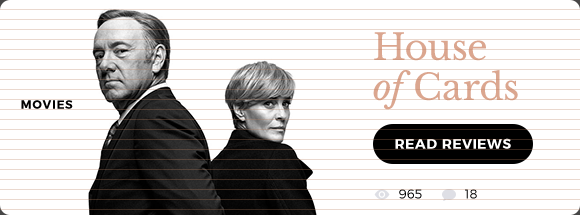
<style>
.page{position:relative;width:580px;height:215px;background:#ffffff}
.page>*{position:absolute;margin:0}
.t1{font:36px/40px "LibreBaskerville-Regular";color:#dba68f}
.t2{font:36px/40px "LibreBaskerville-Italic";color:#dba68f}
.t3{font:12px "Montserrat-Bold";letter-spacing:0.05em;color:#000000;text-transform:uppercase}
.t4{font:14px "Montserrat-Bold";letter-spacing:0.05em;color:#ffffff;text-transform:uppercase}
.t5{font:13px "Montserrat-Light";color:#000000}
.t6{font:13px "Montserrat-Light"}
</style>
<div class="page">
<p class="t1" style="left:373px;top:32px;width:145px;height:78px">House<br><span class="t2">of </span>Cards</p>
<p class="t3" style="left:21px;top:100px;width:52px;height:9px">Movies</p>
<p class="t4" style="left:395px;top:138px;width:116px;height:11px">Read reviews</p>
<p class="t5" style="left:399px;top:189px;width:23px;height:10px">965</p>
<p class="t6" style="left:465px;top:189px;width:12px;height:10px">18</p>
</div>
